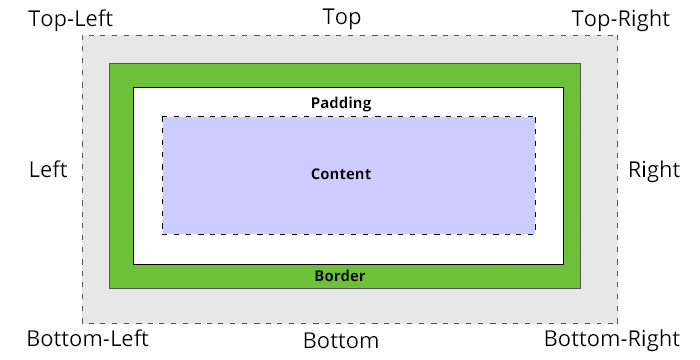
<style>
.page{position:relative;width:700px;height:360px;background:#ffffff}
.page>*{position:absolute;margin:0}
.t1{font:22px "OpenSans";color:#000000}
.t2{font:15px "OpenSans-Bold";color:#000000}
</style>
<div class="page">
<p class="t1" style="left:28px;top:9px;width:85px;height:23px">Top-Left</p>
<p class="t1" style="left:322px;top:8px;width:39px;height:22px">Top</p>
<p class="t1" style="left:571px;top:9px;width:99px;height:23px">Top-Right</p>
<p class="t2" style="left:312px;top:96px;width:59px;height:16px">Padding</p>
<p class="t1" style="left:30px;top:160px;width:37px;height:18px">Left</p>
<p class="t1" style="left:630px;top:160px;width:50px;height:23px">Right</p>
<p class="t2" style="left:311px;top:168px;width:60px;height:12px">Content</p>
<p class="t2" style="left:315px;top:269px;width:51px;height:13px">Border</p>
<p class="t1" style="left:28px;top:329px;width:121px;height:18px">Bottom-Left</p>
<p class="t1" style="left:545px;top:329px;width:135px;height:23px">Bottom-Right</p>
<p class="t1" style="left:304px;top:332px;width:74px;height:17px">Bottom</p>
</div>
